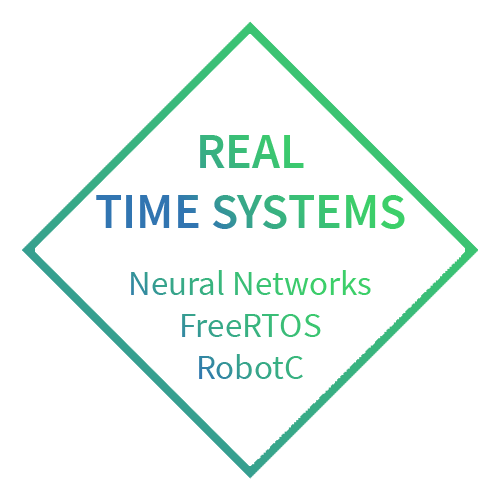
<style>
.page{position:relative;width:500px;height:500px;background:#ffffff}
.page>*{position:absolute;margin:0}
.t1{font:50px "SourceSansPro-SemiBold"}
.t2{font:35px "SourceSansPro-Regular"}
</style>
<div class="page">
<p class="t1" style="left:96px;top:135px;width:309px;height:94px;text-align:center">REAL<br>TIME SYSTEMS</p>
<p class="t2" style="left:131px;top:270px;width:240px;height:109px;text-align:center">Neural Networks<br>FreeRTOS<br>RobotC</p>
</div>
